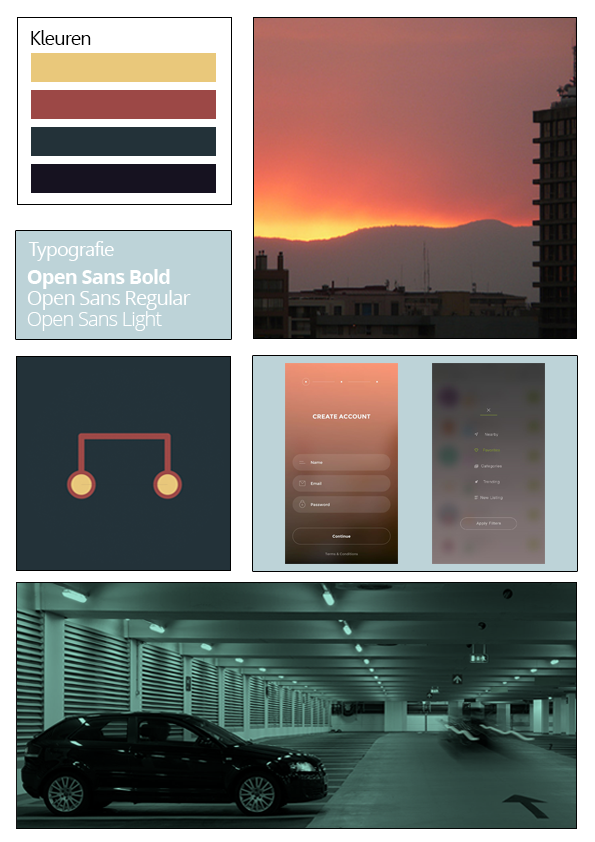
<style>
.page{position:relative;width:595px;height:842px}
.page>*{position:absolute;margin:0}
.t1{font:20px "Leelawadee";letter-spacing:-0.04em;color:#000000}
.t2{font:20px "Leelawadee";letter-spacing:-0.04em;color:#ffffff}
.t3{font:20px/21px "OpenSans";letter-spacing:-0.04em;color:#ffffff}
.t4{font:20px/21px "OpenSans-Bold";letter-spacing:-0.04em;color:#ffffff}
.t5{font:20px/21px "OpenSans-Light";letter-spacing:-0.04em;color:#ffffff}
</style>
<div class="page">
<p class="t1" style="left:31px;top:30px;width:60px;height:15px">Kleuren</p>
<p class="t2" style="left:28px;top:241px;width:86px;height:20px">Typografie</p>
<p class="t3" style="left:27px;top:269px;width:164px;height:62px"><span class="t4">Open Sans Bold<br></span>Open Sans Regular<br><span class="t5">Open Sans Light</span></p>
</div>
